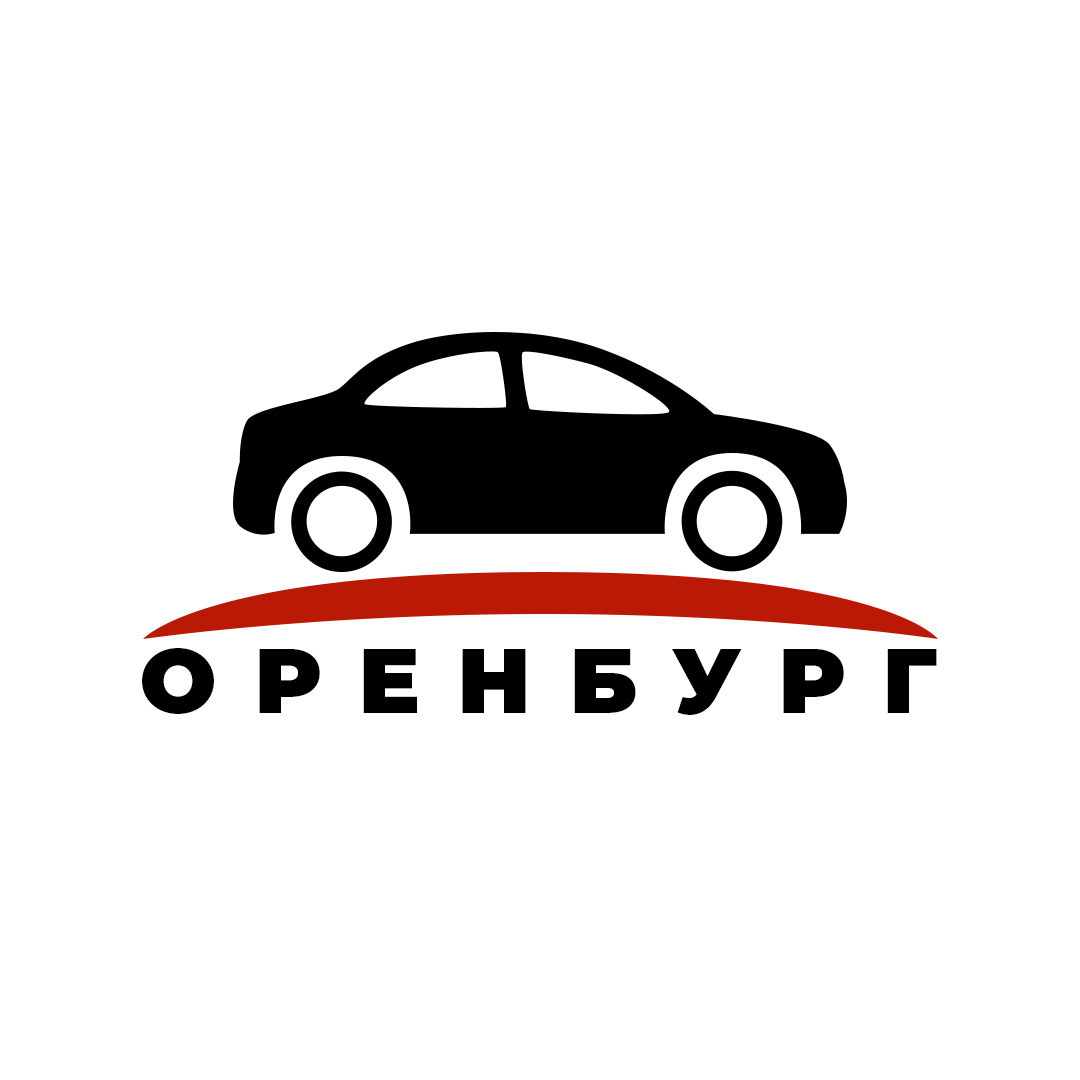
<style>
.page{position:relative;width:1080px;height:1080px;background:#ffffff}
.page>*{position:absolute;margin:0}
.t1{font:91.5px "Montserrat-Black";letter-spacing:0.41em;color:#000000;text-transform:uppercase}
</style>
<div class="page">
<p class="t1" style="left:142px;top:648px;width:795px;height:67px">Оренбург</p>
</div>
